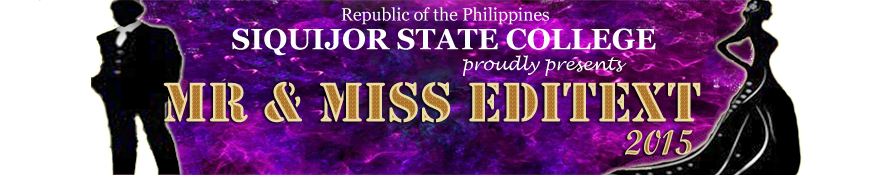
<style>
.page{position:relative;width:875px;height:175px;background:#ffffff}
.page>*{position:absolute;margin:0}
.t1{font:17.5px "Georgia";color:#fbfdfd}
.t2{font:29.2px "Georgia-Bold";color:#fbfdfd}
.t3{font:17.5px "LucidaHandwriting-Italic";color:#fbfdfd}
.t4{font:58.3px "Stencil"}
.t5{font:35px "ScriptMTBold"}
</style>
<div class="page">
<p class="t1" style="left:341px;top:7px;width:208px;height:18px">Republic of the Philippines</p>
<p class="t2" style="left:232px;top:28px;width:424px;height:28px">SIQUIJOR STATE COLLEGE</p>
<p class="t3" style="left:462px;top:55px;width:165px;height:21px">proudly presents</p>
<p class="t4" style="left:163px;top:81px;width:538px;height:42px">MR &amp; Miss editext</p>
<p class="t5" style="left:625px;top:130px;width:68px;height:25px">2015</p>
</div>
